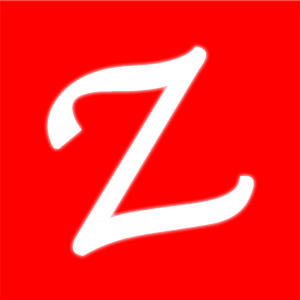
<style>
.page{position:relative;width:300px;height:300px;background:#ff0000}
.page>*{position:absolute;margin:0}
.t1{font:247.7px "Apple-Chancery";color:#ffffff;font-weight:bold;scale:1.41 1}
</style>
<div class="page">
<p class="t1" style="left:47px;top:46px;width:207px;height:210px;rotate:-14deg">Z</p>
</div>
